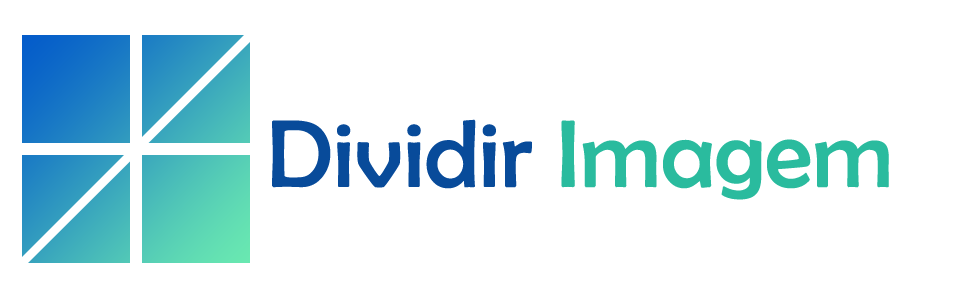
<style>
.page{position:relative;width:961px;height:294px;background:#ffffff}
.page>*{position:absolute;margin:0}
.t1{font:97px "BerlinSansFB-Reg";color:#084b9a}
.t2{font:97px "BerlinSansFB-Reg";color:#2abb9e}
</style>
<div class="page">
<p class="t1" style="left:272px;top:119px;width:617px;height:81px">Dividir <span class="t2">Imagem</span></p>
</div>
